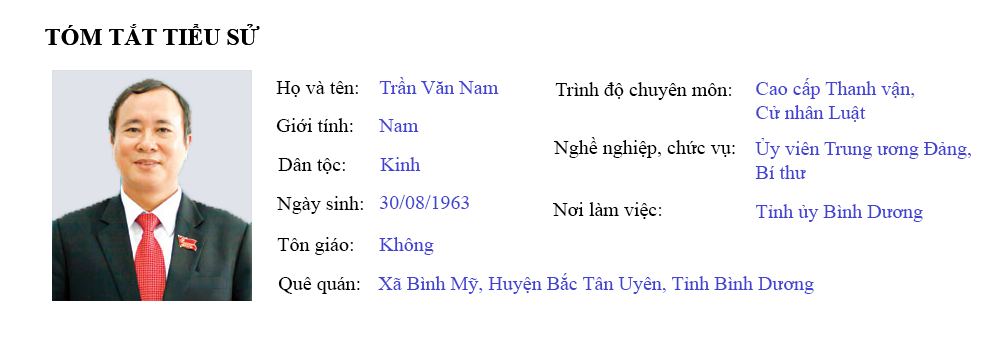
<style>
.page{position:relative;width:997px;height:338px;background:#ffffff}
.page>*{position:absolute;margin:0}
.t1{font:24px "TimesNewRomanPS-BoldMT";color:#000000}
.t2{font:20px "TimesNewRomanPSMT";color:#4343d4}
.t3{font:20px/24px "TimesNewRomanPSMT";color:#4343d4}
.t4{font:20px "TimesNewRomanPSMT";color:#000000}
</style>
<div class="page">
<p class="t1" style="left:45px;top:24px;width:215px;height:21px">TÓM TẮT TIỂU SỬ</p>
<p class="t2" style="left:379px;top:77px;width:120px;height:17px">Trần Văn Nam</p>
<p class="t3" style="left:756px;top:78px;width:159px;height:44px">Cao cấp Thanh vận, <br>Cử nhân Luật</p>
<p class="t4" style="left:276px;top:81px;width:82px;height:16px">Họ và tên:</p>
<p class="t4" style="left:555px;top:82px;width:177px;height:18px">Trình độ chuyên môn:</p>
<p class="t4" style="left:276px;top:118px;width:77px;height:14px">Giới tính:</p>
<p class="t2" style="left:378px;top:119px;width:41px;height:13px">Nam</p>
<p class="t4" style="left:553px;top:137px;width:182px;height:21px">Nghề nghiệp, chức vụ:</p>
<p class="t3" style="left:755px;top:138px;width:216px;height:41px">Ủy viên Trung ương Đảng,<br>Bí thư</p>
<p class="t4" style="left:278px;top:158px;width:67px;height:16px">Dân tộc:</p>
<p class="t2" style="left:380px;top:157px;width:41px;height:14px">Kinh</p>
<p class="t4" style="left:276px;top:196px;width:87px;height:18px">Ngày sinh:</p>
<p class="t2" style="left:380px;top:195px;width:89px;height:14px">30/08/1963</p>
<p class="t4" style="left:552px;top:202px;width:110px;height:17px">Nơi làm việc:</p>
<p class="t2" style="left:756px;top:204px;width:167px;height:18px">Tỉnh ủy Bình Dương</p>
<p class="t4" style="left:277px;top:237px;width:76px;height:18px">Tôn giáo:</p>
<p class="t2" style="left:379px;top:237px;width:55px;height:18px">Không</p>
<p class="t4" style="left:278px;top:277px;width:82px;height:17px">Quê quán:</p>
<p class="t2" style="left:378px;top:273px;width:436px;height:21px">Xã Bình Mỹ, Huyện Bắc Tân Uyên, Tỉnh Bình Dương</p>
</div>
